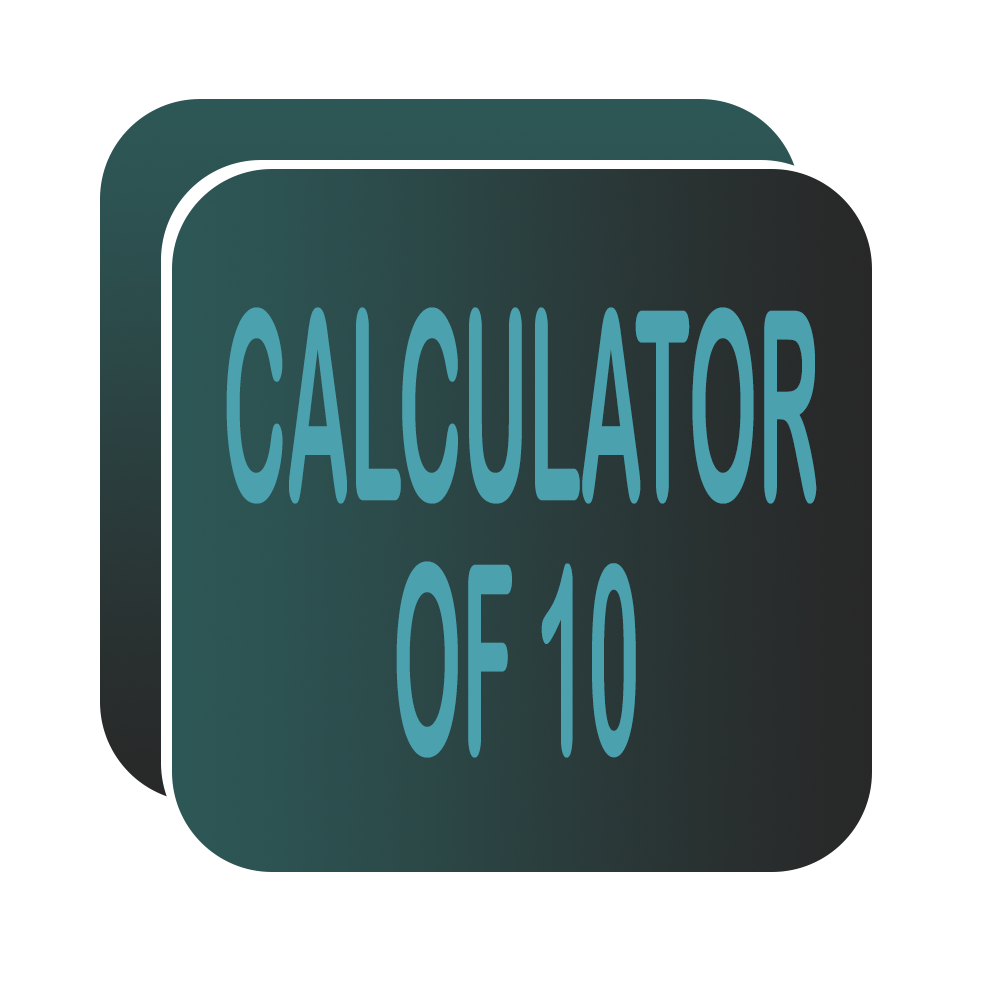
<style>
.page{position:relative;width:1000px;height:1000px;background:#ffffff}
.page>*{position:absolute;margin:0}
.t1{font:264.9px "ArialRoundedMTBold";color:#4ca1af;scale:0.33 1}
</style>
<div class="page">
<p class="t1" style="left:226px;top:307px;width:591px;height:197px">CALCULATOR</p>
<p class="t1" style="left:396px;top:561px;width:240px;height:197px">OF 10</p>
</div>
